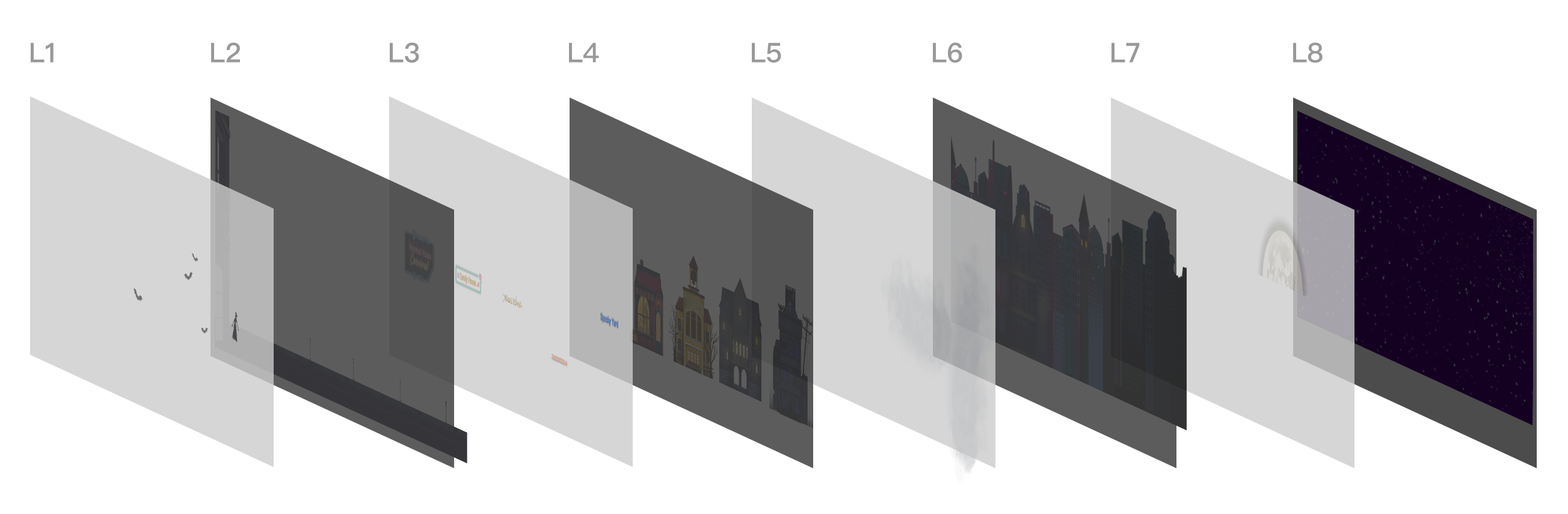
<style>
.page{position:relative;width:1568px;height:514px;background:#ffffff}
.page>*{position:absolute;margin:0}
.t1{font:27.1px "PingFangSC-Semibold";color:#999999}
</style>
<div class="page">
<p class="t1" style="left:31px;top:43px;width:23px;height:20px">L1</p>
<p class="t1" style="left:211px;top:42px;width:29px;height:21px">L2</p>
<p class="t1" style="left:390px;top:42px;width:29px;height:21px">L3</p>
<p class="t1" style="left:569px;top:43px;width:30px;height:20px">L4</p>
<p class="t1" style="left:752px;top:43px;width:29px;height:20px">L5</p>
<p class="t1" style="left:933px;top:42px;width:29px;height:21px">L6</p>
<p class="t1" style="left:1111px;top:43px;width:29px;height:20px">L7</p>
<p class="t1" style="left:1293px;top:42px;width:30px;height:21px">L8</p>
</div>
